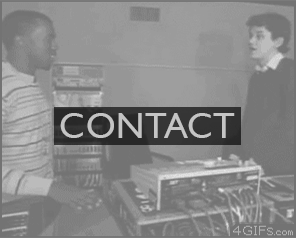
<style>
.page{position:relative;width:296px;height:238px}
.page>*{position:absolute;margin:0}
.t1{font:36px "GillSans";letter-spacing:0.02em;color:#c5c5c5}
</style>
<div class="page">
<p class="t1" style="left:60px;top:113px;width:175px;height:25px">CONTACT</p>
</div>
